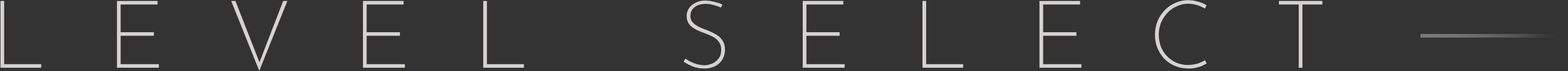
<style>
.page{position:relative;width:1568px;height:71px;background:#333333}
.page>*{position:absolute;margin:0}
.t1{font:94.1px "JosefinSansRoman-Regular_233.000wght";letter-spacing:0.64em;color:#d6d2d0}
</style>
<div class="page">
<p class="t1" style="left:0px;top:0px;width:1323px;height:71px">LEVEL SELECT</p>
</div>
